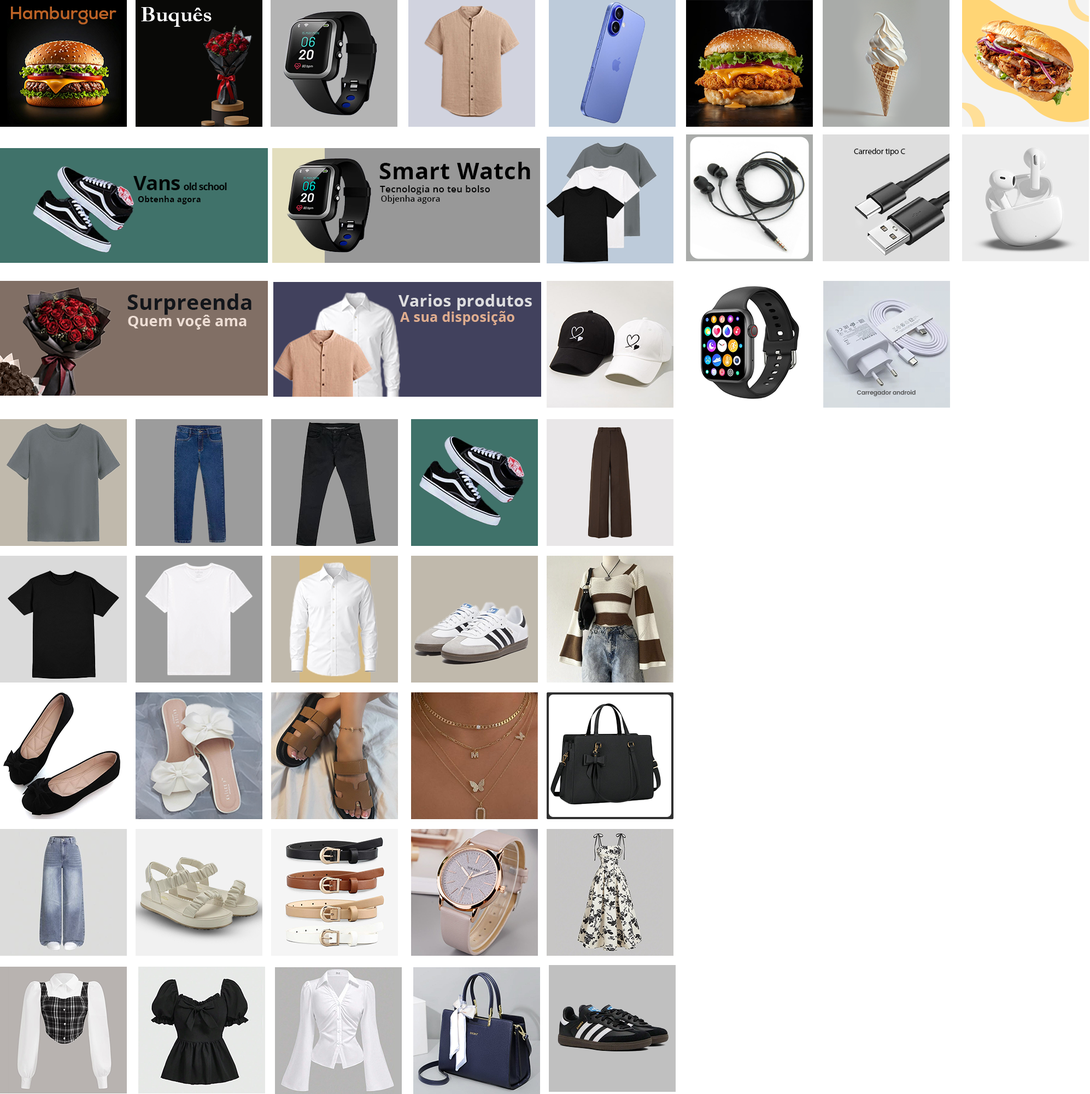
<style>
.page{position:relative;width:1090px;height:1094px;background:#ffffff}
.page>*{position:absolute;margin:0}
.t1{font:17.2px "NexaDemo-Bold";color:#bd6326}
.t2{font:22.2px "Garamond-Bold";color:#ffffff}
.t3{font:8.1px "Poppins-Medium";color:#000000}
.t4{font:22.9px "OpenSans-Bold";letter-spacing:0.02em;color:#000000}
.t5{font:10px "OpenSans-Bold";letter-spacing:-0.07em;color:#020807}
.t6{font:20px "OpenSans-Bold";letter-spacing:-0.02em;color:#020807}
.t7{font:9.3px "OpenSans-Semibold";letter-spacing:0.02em;color:#000000}
.t8{font:8.2px "OpenSans-Bold";letter-spacing:0.02em;color:#000000}
.t9{font:8.1px "OpenSans-Semibold";letter-spacing:0.02em;color:#000000}
.t10{font:21px "OpenSans-Bold";letter-spacing:0.02em;color:#12151a}
.t11{font:16.3px "OpenSans-Bold";letter-spacing:0.02em;color:#dddddf}
.t12{font:14.5px "OpenSans-Bold";letter-spacing:0.02em;color:#eeded5}
.t13{font:13.5px "OpenSans-Bold";letter-spacing:0.02em;color:#dfad8f}
.t14{font:5.8px "Poppins-Medium";color:#4a4a4a}
</style>
<div class="page">
<p class="t1" style="left:11px;top:7px;width:105px;height:18px">Hamburguer</p>
<p class="t2" style="left:141px;top:7px;width:71px;height:20px">Buquês</p>
<p class="t3" style="left:854px;top:148px;width:51px;height:8px">Carredor tipo C</p>
<p class="t4" style="left:379px;top:162px;width:151px;height:17px">Smart Watch</p>
<p class="t5" style="left:133px;top:176px;width:94px;height:14px"><span class="t6">Vans </span>old school</p>
<p class="t7" style="left:380px;top:185px;width:110px;height:10px">Tecnologia no teu bolso</p>
<p class="t8" style="left:138px;top:196px;width:63px;height:8px">Obtenha agora</p>
<p class="t9" style="left:381px;top:195px;width:59px;height:9px">Objenha agora</p>
<p class="t10" style="left:127px;top:293px;width:124px;height:22px">Surpreenda</p>
<p class="t11" style="left:398px;top:294px;width:134px;height:16px">Varios produtos</p>
<p class="t12" style="left:128px;top:315px;width:118px;height:15px">Quem voçê ama</p>
<p class="t13" style="left:400px;top:311px;width:114px;height:14px">A sua disposição</p>
<p class="t14" style="left:856px;top:390px;width:59px;height:7px">Carregador android</p>
</div>
